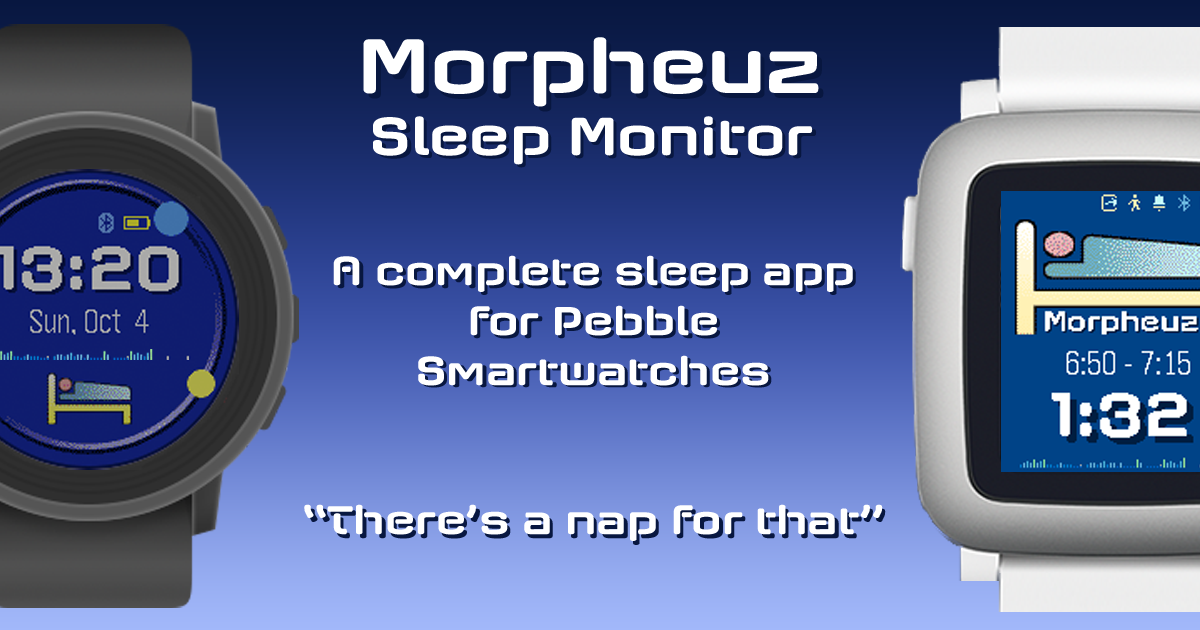
<style>
.page{position:relative;width:1200px;height:630px}
.page>*{position:absolute;margin:0}
.t1{font:79.7px "AxaxaxRg-Bold";color:#ffffff}
.t2{font:79.7px "AxaxaxRg-Bold"}
.t3{font:55.3px "AxaxaxRg-Bold";color:#ffffff}
.t4{font:55.3px "AxaxaxRg-Bold"}
.t5{font:41.5px "AxaxaxRg-Bold";color:#ffffff}
.t6{font:41.5px "AxaxaxRg-Bold"}
</style>
<div class="page">
<p class="t1" style="left:363px;top:37px;width:456px;height:70px">Morpheuz</p>
<p class="t2" style="left:368px;top:42px;width:456px;height:70px">Morpheuz</p>
<p class="t3" style="left:373px;top:116px;width:440px;height:49px">Sleep Monitor</p>
<p class="t4" style="left:377px;top:119px;width:440px;height:49px">Sleep Monitor</p>
<p class="t5" style="left:333px;top:255px;width:520px;height:131px;text-align:center">A complete sleep app<br>for Pebble<br>Smartwatches</p>
<p class="t5" style="left:304px;top:504px;width:579px;height:37px">“There’s a nap for that”</p>
<p class="t6" style="left:308px;top:508px;width:578px;height:37px">“There’s a nap for that”</p>
</div>
